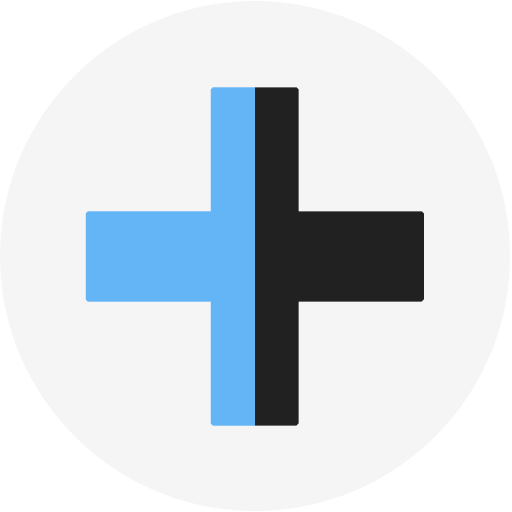
<style>
.page{position:relative;width:512px;height:512px;background:#f5f5f5}
.page>*{position:absolute;margin:0}
.t1{font:666.7px "Arial-BoldMT";letter-spacing:-0.04em;font-weight:bold}
</style>
<div class="page">
<p class="t1" style="left:85px;top:87px;width:339px;height:339px">+</p>
</div>
